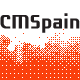
<style>
.page{position:relative;width:80px;height:80px;background:#ffffff}
.page>*{position:absolute;margin:0}
.t1{font:21px "Laconic-Bold";color:#231f20}
</style>
<div class="page">
<p class="t1" style="left:0px;top:13px;width:80px;height:20px">CMSpain</p>
</div>
